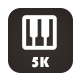
<style>
.page{position:relative;width:80px;height:80px;background:#ffffff}
.page>*{position:absolute;margin:0}
.t1{font:15px "Bauhaus93";color:#ffffff}
</style>
<div class="page">
<p class="t1" style="left:32px;top:57px;width:17px;height:11px">5K</p>
</div>
